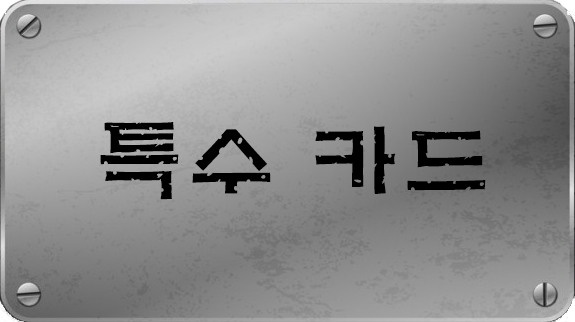
<style>
.page{position:relative;width:575px;height:322px}
.page>*{position:absolute;margin:0}
.t1{font:90px "H2mkpB";letter-spacing:0.02em;color:#000000;text-transform:uppercase}
</style>
<div class="page">
<p class="t1" style="left:100px;top:122px;width:386px;height:78px">특수 카드</p>
</div>
